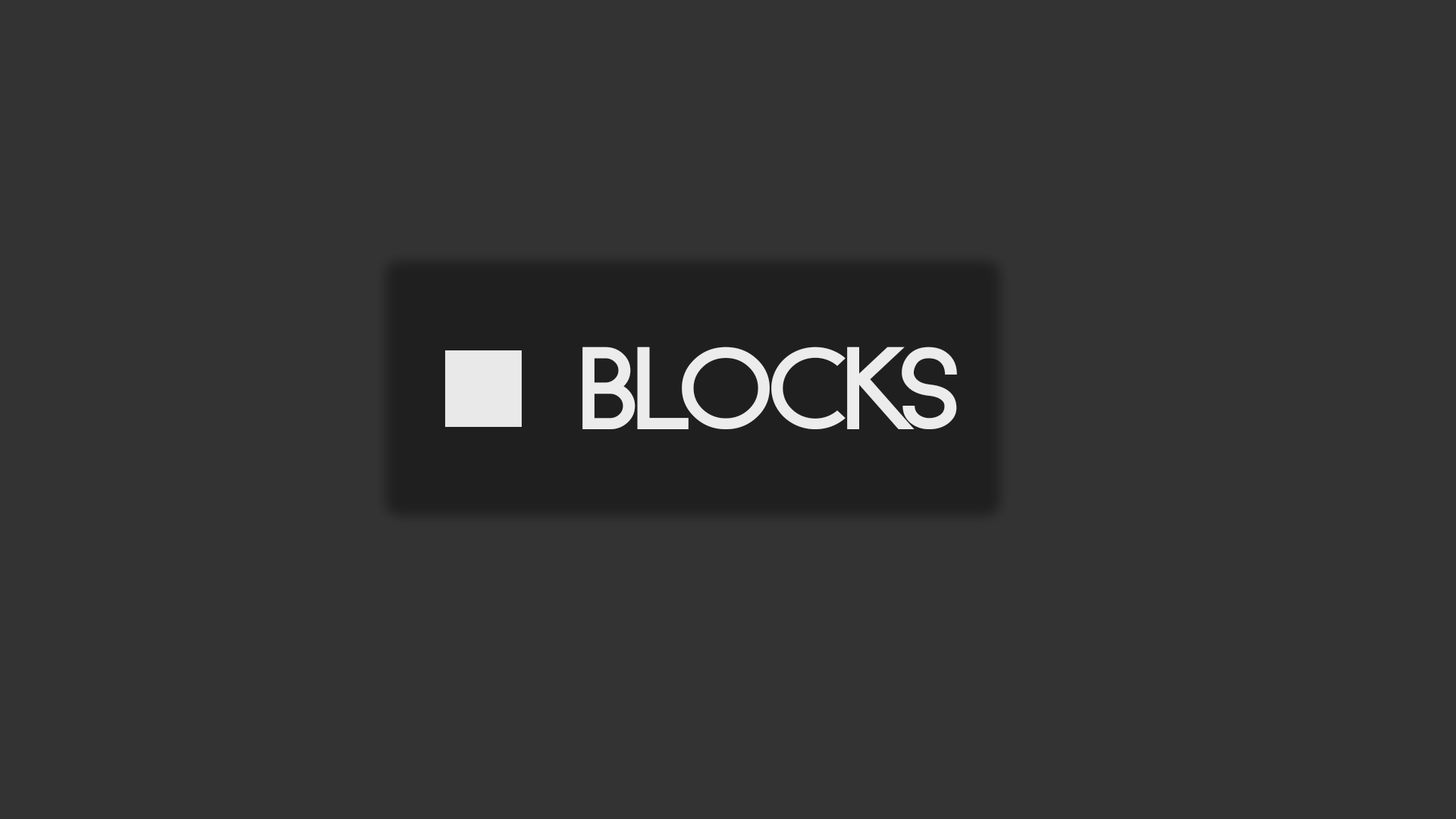
<style>
.page{position:relative;width:1456px;height:819px;background:#333333}
.page>*{position:absolute;margin:0}
.t1{font:102.8px "AlpacaScarlettDemo";letter-spacing:-0.04em;color:#ffffff;scale:1.07 1}
</style>
<div class="page">
<p class="t1" style="left:582px;top:347px;width:375px;height:82px;opacity:0.9">BLOCKS</p>
</div>
